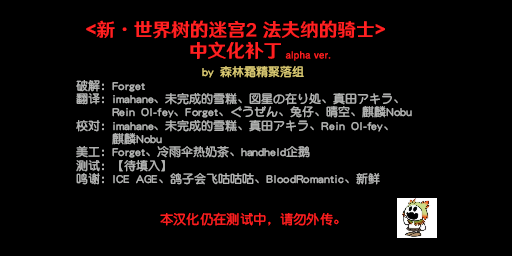
<style>
.page{position:relative;width:512px;height:256px;background:#000000}
.page>*{position:absolute;margin:0}
.t1{font:18.7px/21.3px "HYWenHei-HEW";color:#ff2021}
.t2{font:9.3px "HYWenHei-FEW";letter-spacing:0.025em;color:#ff2021}
.t3{font:12px/13.3px "DFYuanGBA-W7";color:#b1b2b1}
.t4{font:12px/13.3px "DFYuanGBA-W7";color:#d6c670}
.t5{font:13.3px/16px "DFYuanGBA-W7";color:#f91f20}
</style>
<div class="page">
<p class="t1" style="left:86px;top:20px;width:299px;height:39px;text-align:center">&lt;新·世界树的迷宫2 法夫纳的骑士&gt;<br>中文化补丁</p>
<p class="t2" style="left:285px;top:51px;width:46px;height:10px">alpha ver.</p>
<p class="t3" style="left:76px;top:65px;width:336px;height:161px;text-align:center"><span class="t4">by 森林霜精聚落组<br></span>破解：Forget<br>翻译：imahane、未完成的雪糕、図星の在り処、真田アキラ、<br>      Rein Ol-fey、Forget、ぐうぜん、兔仔、晴空、麒麟Nobu<br>校对：imahane、未完成的雪糕、真田アキラ、Rein Ol-fey、<br>      麒麟Nobu<br>美工：Forget、冷雨伞热奶茶、handheld企鹅<br>测试：【待填入】<br>鸣谢：ICE AGE、鸽子会飞咕咕咕、BloodRomantic、新鲜<br><br><br><span class="t5">本汉化仍在测试中，请勿外传。</span></p>
</div>
